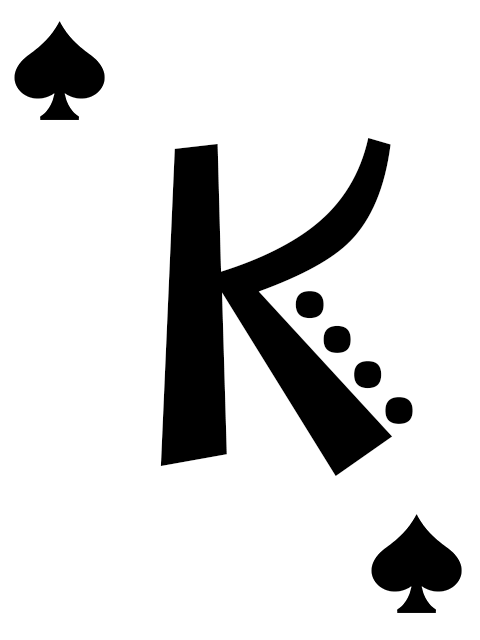
<style>
.page{position:relative;width:480px;height:640px;background:#ffffff}
.page>*{position:absolute;margin:0}
.t1{font:386.3px "Jokerman-Regular";color:#000000}
</style>
<div class="page">
<p class="t1" style="left:160px;top:138px;width:253px;height:338px">K</p>
</div>
